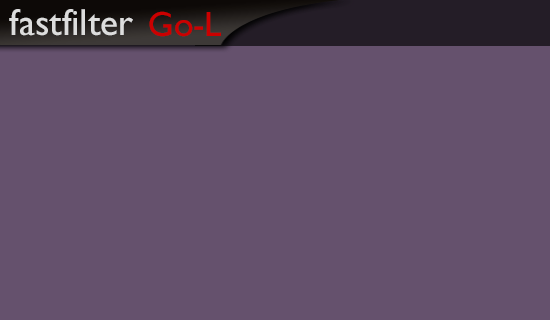
<style>
.page{position:relative;width:550px;height:320px;background:#65516d}
.page>*{position:absolute;margin:0}
.t1{font:37.7px "GillSansMT";color:#dddddd}
.t2{font:35.1px "GillSansMT";color:#cb0000}
</style>
<div class="page">
<p class="t1" style="left:9px;top:9px;width:124px;height:27px">fastfilter</p>
<p class="t2" style="left:149px;top:11px;width:72px;height:26px">Go-L</p>
</div>
